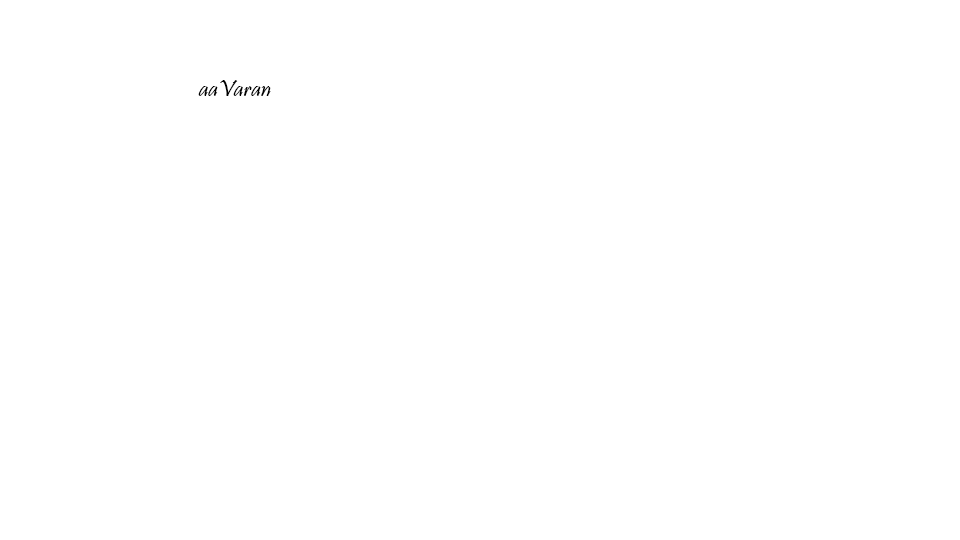
<style>
.page{position:relative;width:960px;height:540px;background:#ffffff}
.page>*{position:absolute;margin:0}
.t1{font:24.4px "Pristina-Regular";color:#000000}
</style>
<div class="page">
<p class="t1" style="left:198px;top:80px;width:73px;height:16px">aaVaran</p>
</div>
